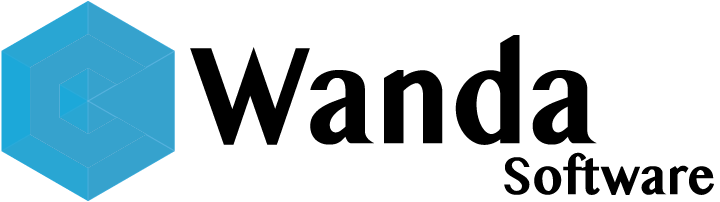
<style>
.page{position:relative;width:720px;height:202px;background:#ffffff}
.page>*{position:absolute;margin:0}
.t1{font:125.8px "BanglaMN-Bold";color:#000000;scale:0.89 1}
.t2{font:48px "BanglaMN-Bold";color:#000000;scale:0.89 1}
</style>
<div class="page">
<p class="t1" style="left:190px;top:35px;width:407px;height:110px">Wanda</p>
<p class="t2" style="left:504px;top:152px;width:210px;height:43px">Software</p>
</div>
